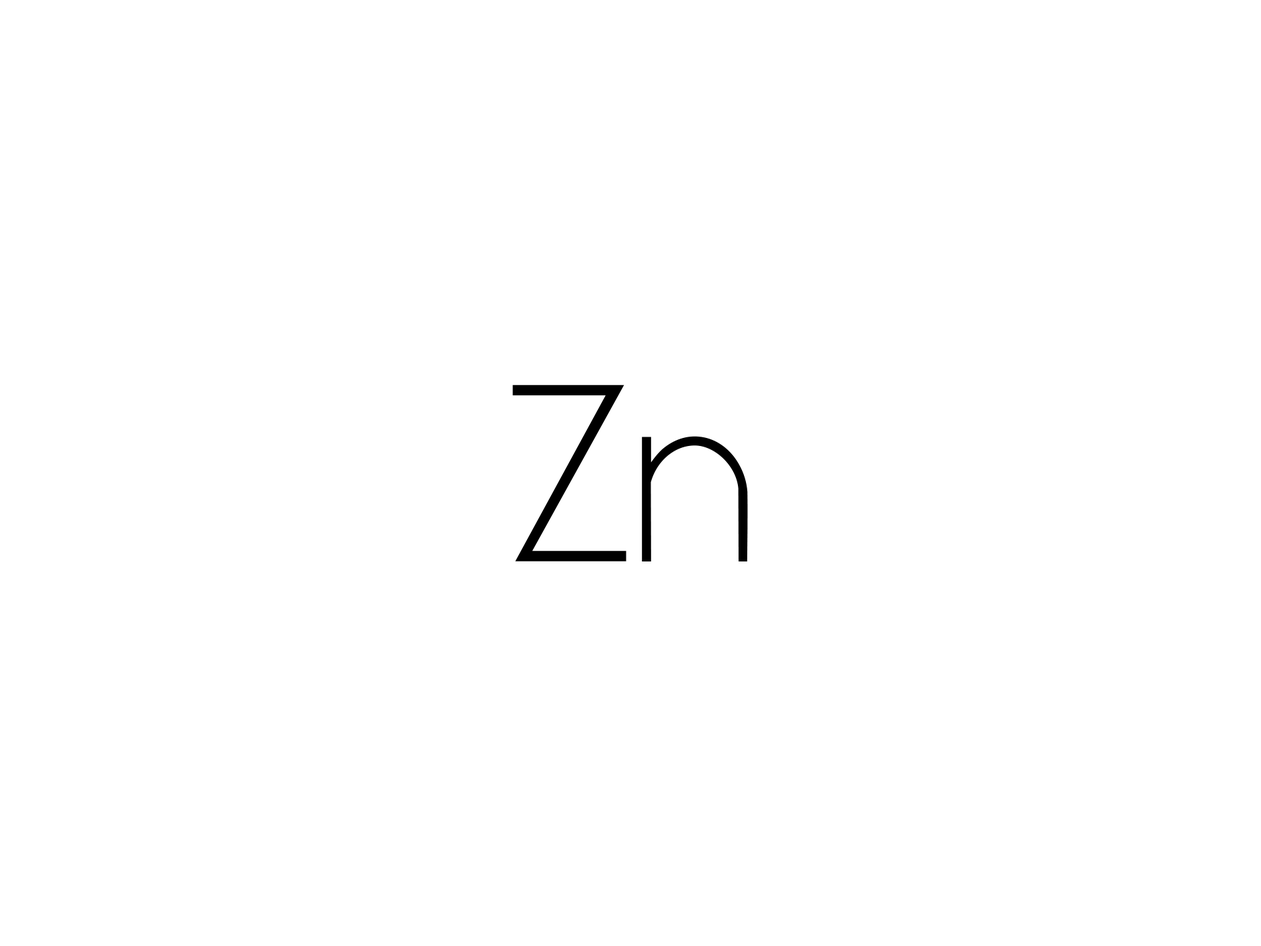
<style>
.page{position:relative;width:1261px;height:946px;background:#ffffff}
.page>*{position:absolute;margin:0}
.t1{font:250.2px "Alcubierre";color:#000000;scale:0.95 1}
</style>
<div class="page">
<p class="t1" style="left:512px;top:384px;width:236px;height:177px">Zn</p>
</div>
